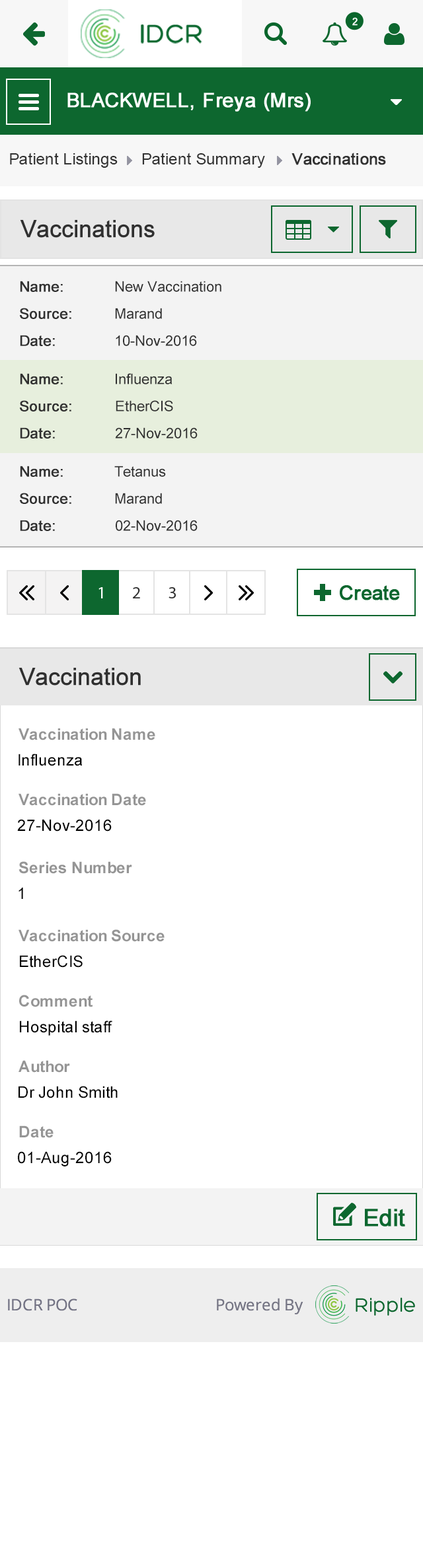
<style>
.page{position:relative;width:423px;height:1568px;background:#ffffff}
.page>*{position:absolute;margin:0}
.t1{font:15.9px "ArialMT";color:#313131}
.t2{font:15.9px "ArialMT";color:#313131;font-weight:bold}
.t3{font:23.8px "ArialMT";color:#303030;font-weight:bold}
.t4{font:14.5px "ArialMT";color:#303030;font-weight:bold}
.t5{font:14.5px "ArialMT";color:#303030}
.t6{font:15.9px "Arial-BoldMT";color:#959595}
.t7{font:15.9px "ArialMT";color:#000000}
</style>
<div class="page">
<p class="t1" style="left:10px;top:153px;width:108px;height:15px">Patient Listings</p>
<p class="t1" style="left:142px;top:153px;width:123px;height:15px">Patient Summary</p>
<p class="t2" style="left:291px;top:153px;width:95px;height:12px">Vaccinations</p>
<p class="t3" style="left:20px;top:220px;width:135px;height:18px">Vaccinations</p>
<p class="t4" style="left:20px;top:281px;width:43px;height:11px">Name:</p>
<p class="t5" style="left:115px;top:281px;width:106px;height:11px">New Vaccination</p>
<p class="t4" style="left:20px;top:308px;width:51px;height:11px">Source:</p>
<p class="t5" style="left:115px;top:308px;width:47px;height:11px">Marand</p>
<p class="t4" style="left:20px;top:335px;width:35px;height:11px">Date:</p>
<p class="t5" style="left:116px;top:335px;width:81px;height:11px">10-Nov-2016</p>
<p class="t4" style="left:20px;top:373px;width:43px;height:11px">Name:</p>
<p class="t5" style="left:116px;top:373px;width:56px;height:11px">Influenza</p>
<p class="t4" style="left:20px;top:400px;width:51px;height:11px">Source:</p>
<p class="t5" style="left:116px;top:400px;width:57px;height:11px">EtherCIS</p>
<p class="t4" style="left:20px;top:427px;width:35px;height:12px">Date:</p>
<p class="t5" style="left:115px;top:427px;width:82px;height:12px">27-Nov-2016</p>
<p class="t4" style="left:20px;top:466px;width:43px;height:11px">Name:</p>
<p class="t5" style="left:114px;top:466px;width:52px;height:11px">Tetanus</p>
<p class="t4" style="left:20px;top:493px;width:51px;height:11px">Source:</p>
<p class="t5" style="left:115px;top:493px;width:47px;height:11px">Marand</p>
<p class="t4" style="left:20px;top:520px;width:35px;height:11px">Date:</p>
<p class="t5" style="left:116px;top:520px;width:81px;height:11px">02-Nov-2016</p>
<p class="t3" style="left:18px;top:668px;width:123px;height:18px">Vaccination</p>
<p class="t6" style="left:18px;top:728px;width:137px;height:12px">Vaccination Name</p>
<p class="t7" style="left:18px;top:754px;width:65px;height:12px">Influenza</p>
<p class="t6" style="left:18px;top:793px;width:128px;height:13px">Vaccination Date</p>
<p class="t7" style="left:17px;top:819px;width:95px;height:13px">27-Nov-2016</p>
<p class="t6" style="left:18px;top:861px;width:114px;height:13px">Series Number</p>
<p class="t7" style="left:18px;top:887px;width:5px;height:12px">1</p>
<p class="t6" style="left:18px;top:929px;width:146px;height:13px">Vaccination Source</p>
<p class="t7" style="left:20px;top:955px;width:63px;height:13px">EtherCIS</p>
<p class="t6" style="left:19px;top:995px;width:73px;height:12px">Comment</p>
<p class="t7" style="left:20px;top:1020px;width:92px;height:16px">Hospital staff</p>
<p class="t6" style="left:18px;top:1060px;width:52px;height:13px">Author</p>
<p class="t7" style="left:18px;top:1086px;width:100px;height:12px">Dr John Smith</p>
<p class="t6" style="left:19px;top:1125px;width:34px;height:13px">Date</p>
<p class="t7" style="left:18px;top:1151px;width:94px;height:15px">01-Aug-2016</p>
</div>
